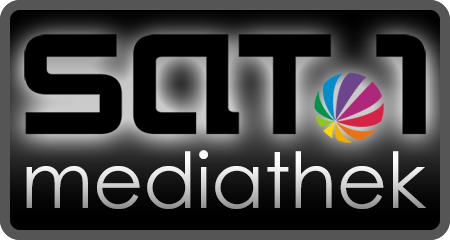
<style>
.page{position:relative;width:450px;height:240px;background:#000000}
.page>*{position:absolute;margin:0}
.t1{font:77px "CenturyGothic"}
</style>
<div class="page">
<p class="t1" style="left:26px;top:150px;width:400px;height:59px">mediathek</p>
</div>
